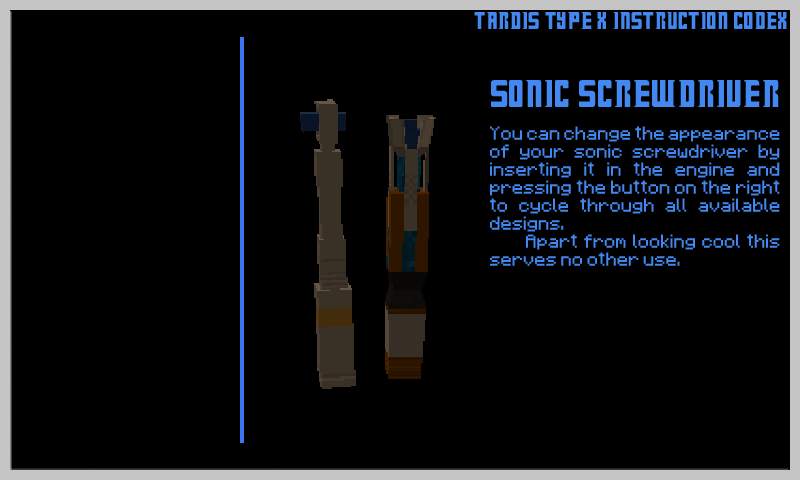
<style>
.page{position:relative;width:800px;height:480px;background:#000000}
.page>*{position:absolute;margin:0}
.t1{font:27px "Doctor-Who";color:#4388f1}
.t2{font:15px "Minecraftia-Regular";color:#4388f1}
.t3{font:43px "Doctor-Who";color:#4388f1}
</style>
<div class="page">
<p class="t1" style="left:474px;top:12px;width:313px;height:17px">TARDIS Type X Instruction Codex</p>
<p class="t2" style="left:490px;top:80px;width:290px;height:186px;text-align:center"><span class="t3">Sonic Screwdriver<br> <br></span>You can change the appearance of your sonic screwdriver by inserting it in the engine and pressing the button on the right to cycle through all available designs.<br> Apart from looking cool this serves no other use.</p>
</div>
